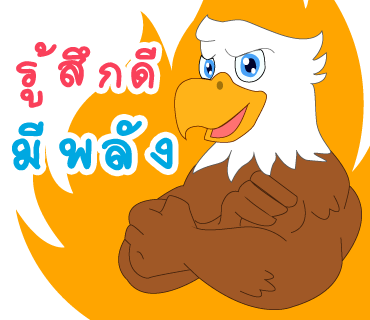
<style>
.page{position:relative;width:370px;height:320px;background:#ffffff}
.page>*{position:absolute;margin:0}
.t1{font:72px "2005_iannnnnMTV";letter-spacing:0.075em;color:#fa405a;scale:1.06 1}
.t2{font:86px "2005_iannnnnMTV";letter-spacing:0.075em;color:#00a8e1;scale:1.06 1}
</style>
<div class="page">
<p class="t1" style="left:16px;top:42px;width:141px;height:66px">รู้สึกดี</p>
<p class="t2" style="left:12px;top:120px;width:161px;height:51px">มีพลัง</p>
</div>
